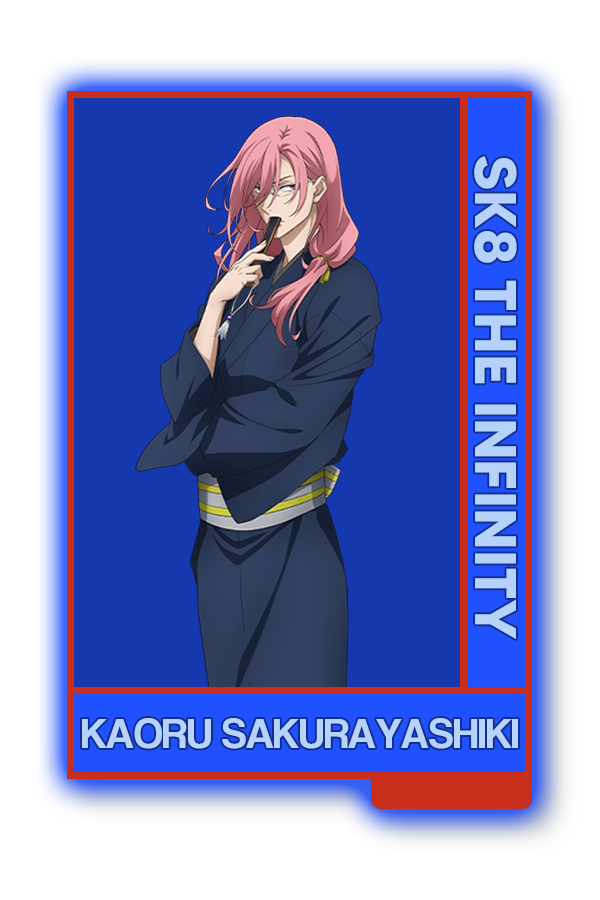
<style>
.page{position:relative;width:600px;height:900px;background:#1638af}
.page>*{position:absolute;margin:0}
.t1{font:58.4px "MADETOMMY-Bold";color:#b5d3fa}
.t2{font:42.5px "CoolveticaRg-Regular";color:#b6d4fa}
</style>
<div class="page">
<p class="t1" style="left:474px;top:156px;width:43px;height:483px;rotate:90deg">SK8 THE INFINITY</p>
<p class="t2" style="left:82px;top:718px;width:436px;height:31px">KAORU SAKURAYASHIKI</p>
</div>
